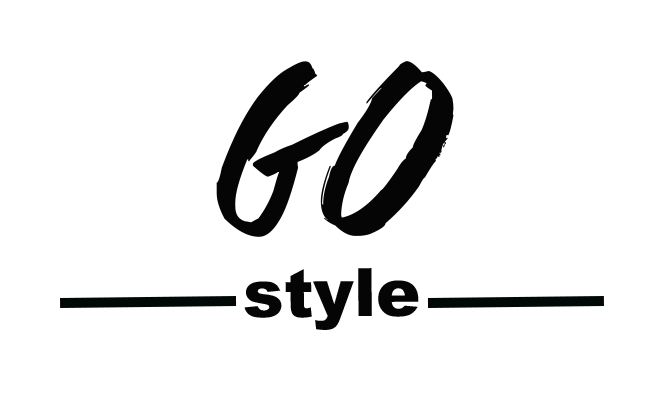
<style>
.page{position:relative;width:669px;height:414px;background:#ffffff}
.page>*{position:absolute;margin:0}
.t1{font:66.7px "Arial-Black";color:#050505}
.t2{font:250px "DaStreets";color:#050505}
</style>
<div class="page">
<p class="t1" style="left:216px;top:61px;width:238px;height:269px;text-align:center"><span class="t2">Go<br></span>style</p>
</div>
